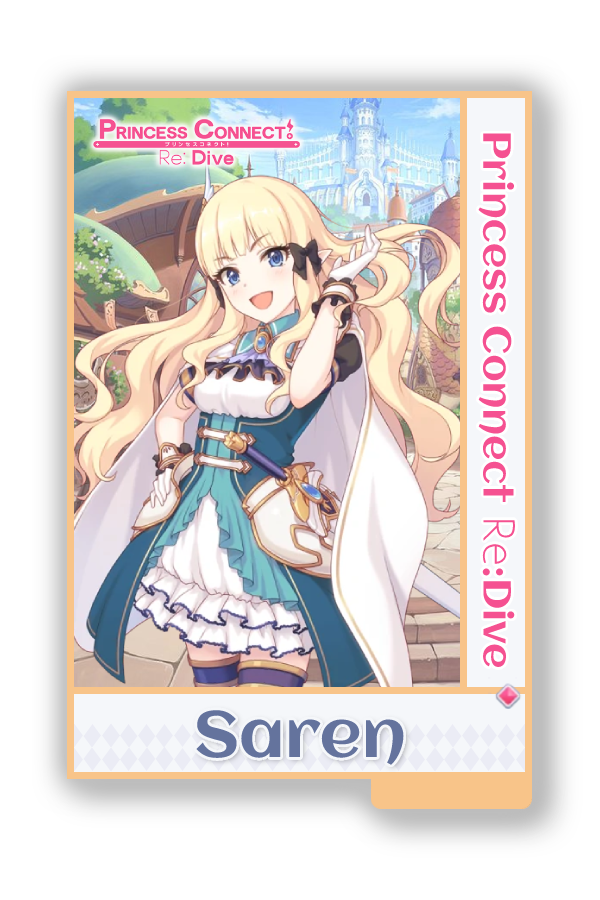
<style>
.page{position:relative;width:600px;height:900px;background:#ffffff}
.page>*{position:absolute;margin:0}
.t1{font:39px "Aclonica-Regular";color:#f55191}
.t2{font:39px "AaarghNormal";color:#f55191}
.t3{font:65px "Aclonica-Regular";color:#64739d}
</style>
<div class="page">
<p class="t1" style="left:478px;top:133px;width:38px;height:534px;rotate:90deg">Princess Connect <span class="t2">Re</span>:Dive</p>
<p class="t3" style="left:196px;top:710px;width:208px;height:55px">Saren</p>
</div>
